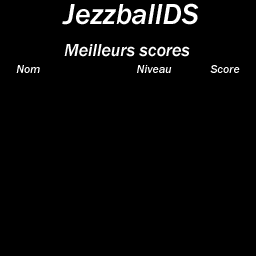
<style>
.page{position:relative;width:256px;height:256px;background:#000000}
.page>*{position:absolute;margin:0}
.t1{font:30px "FranklinGothic-MediumItalic";color:#ffffff}
.t2{font:18px "FranklinGothic-MediumItalic";color:#ffffff}
.t3{font:12px "FranklinGothic-MediumItalic";color:#ffffff}
</style>
<div class="page">
<p class="t1" style="left:62px;top:3px;width:137px;height:22px">JezzballDS</p>
<p class="t2" style="left:64px;top:44px;width:126px;height:13px">Meilleurs scores</p>
<p class="t3" style="left:16px;top:65px;width:224px;height:8px">Nom                                Niveau             Score</p>
</div>
